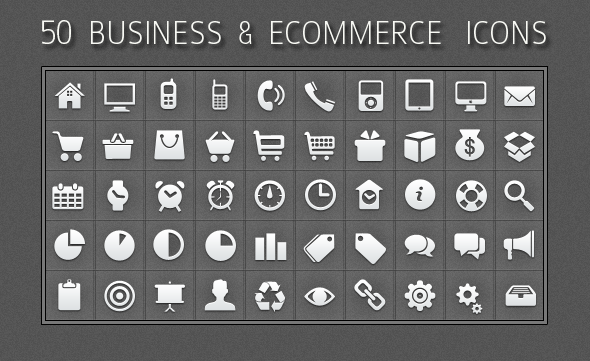
<style>
.page{position:relative;width:590px;height:361px}
.page>*{position:absolute;margin:0}
.t1{font:34.9px "Colaborate-Thin";color:#e3e6e7;scale:0.93 1}
.t2{font:38.9px "Colaborate-Thin";color:#e3e6e7;scale:0.93 1}
</style>
<div class="page">
<p class="t1" style="left:41px;top:20px;width:505px;height:24px"><span class="t2">50</span>  BUSINESS  &amp;  ECOMMERCE   ICONS</p>
</div>
